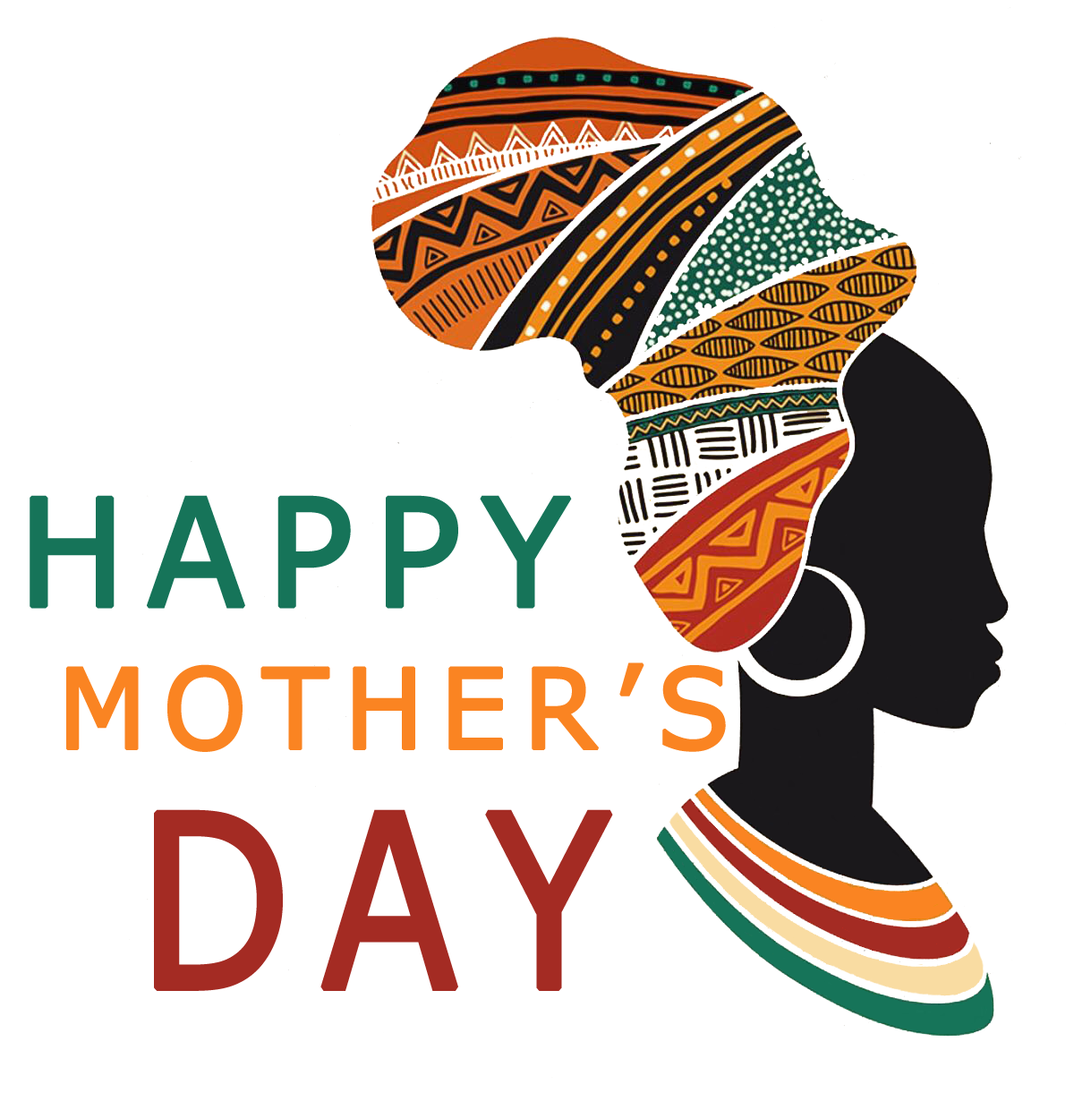
<style>
.page{position:relative;width:1091px;height:1093px;background:#ffffff}
.page>*{position:absolute;margin:0}
.t1{font:149.1px "Verdana";letter-spacing:0.12em;color:#167459;font-weight:bold;scale:0.96 1}
.t2{font:110.8px "Verdana";letter-spacing:0.12em;color:#fa8422;font-weight:bold;scale:0.96 1}
.t3{font:240.1px "Verdana";letter-spacing:0.12em;color:#a42b23;font-weight:bold;scale:0.83 1}
</style>
<div class="page">
<p class="t1" style="left:30px;top:495px;width:542px;height:114px">HAPPY</p>
<p class="t2" style="left:66px;top:662px;width:660px;height:90px">MOTHER’S</p>
<p class="t3" style="left:154px;top:809px;width:459px;height:182px">DAY</p>
</div>
